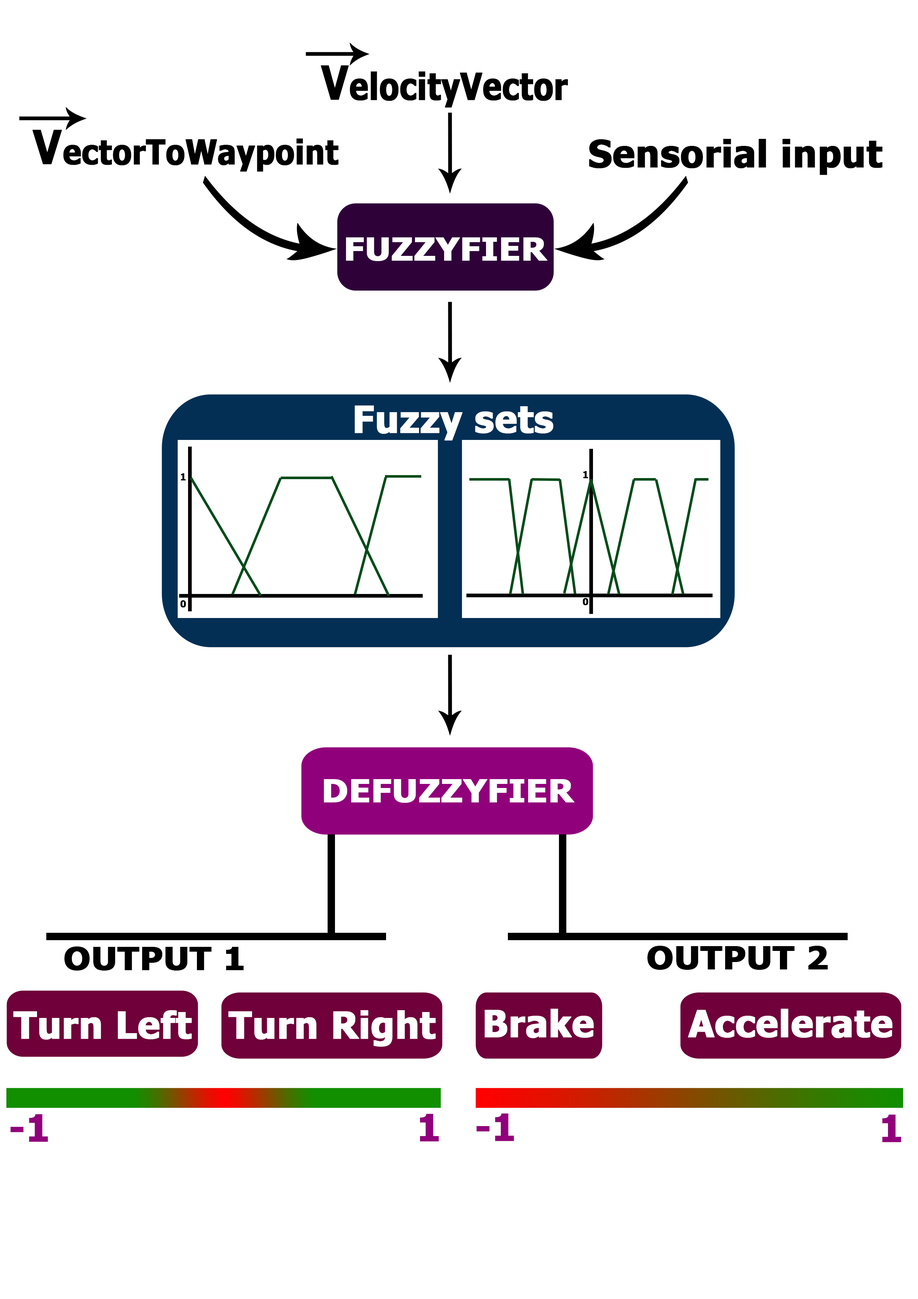
<style>
.page{position:relative;width:918px;height:1299px;background:#ffffff}
.page>*{position:absolute;margin:0}
.t1{font:37px "Tahoma-Bold";color:#000000;font-weight:bold;scale:0.85 1}
.t2{font:46.8px "Tahoma-Bold";color:#000000;font-weight:bold;scale:0.85 1}
.t3{font:33.9px "Tahoma-Bold";color:#000000;font-weight:bold;scale:0.9 1}
.t4{font:46.7px "Tahoma-Bold";color:#000000;font-weight:bold;scale:0.9 1}
.t5{font:37px "Tahoma-Bold";color:#000000;font-weight:bold}
.t6{font:31.5px "Tahoma-Bold";color:#ffffff;font-weight:bold;scale:1.1 1}
.t7{font:37px "Tahoma-Bold";color:#ffffff;font-weight:bold}
.t8{font:9.3px "Tahoma-Bold";color:#000000;font-weight:bold}
.t9{font:31.5px "Tahoma-Bold";color:#000000;font-weight:bold;scale:1.1 1}
.t10{font:37px "Tahoma-Bold";color:#91007b;font-weight:bold}
</style>
<div class="page">
<p class="t1" style="left:321px;top:65px;width:247px;height:43px"><span class="t2">V</span>elocityVector</p>
<p class="t3" style="left:32px;top:130px;width:307px;height:42px"><span class="t4">V</span>ectorToWaypoint</p>
<p class="t5" style="left:589px;top:139px;width:294px;height:36px">Sensorial input</p>
<p class="t6" style="left:346px;top:237px;width:202px;height:24px">FUZZYFIER</p>
<p class="t7" style="left:355px;top:405px;width:198px;height:36px">Fuzzy sets</p>
<p class="t8" style="left:181px;top:473px;width:5px;height:8px">1</p>
<p class="t8" style="left:583px;top:471px;width:5px;height:7px">1</p>
<p class="t8" style="left:180px;top:600px;width:6px;height:8px">0</p>
<p class="t8" style="left:583px;top:598px;width:6px;height:7px">0</p>
<p class="t6" style="left:324px;top:779px;width:251px;height:24px">DEFUZZYFIER</p>
<p class="t9" style="left:64px;top:946px;width:180px;height:24px">OUTPUT 1</p>
<p class="t9" style="left:648px;top:946px;width:180px;height:24px">OUTPUT 2</p>
<p class="t7" style="left:13px;top:1010px;width:179px;height:30px">Turn Left</p>
<p class="t7" style="left:228px;top:1010px;width:208px;height:37px">Turn Right</p>
<p class="t7" style="left:485px;top:1008px;width:109px;height:30px">Brake</p>
<p class="t7" style="left:688px;top:1008px;width:205px;height:30px">Accelerate</p>
<p class="t10" style="left:10px;top:1114px;width:38px;height:28px">-1</p>
<p class="t10" style="left:420px;top:1114px;width:19px;height:27px">1</p>
<p class="t10" style="left:476px;top:1113px;width:38px;height:28px">-1</p>
<p class="t10" style="left:882px;top:1114px;width:19px;height:28px">1</p>
</div>
